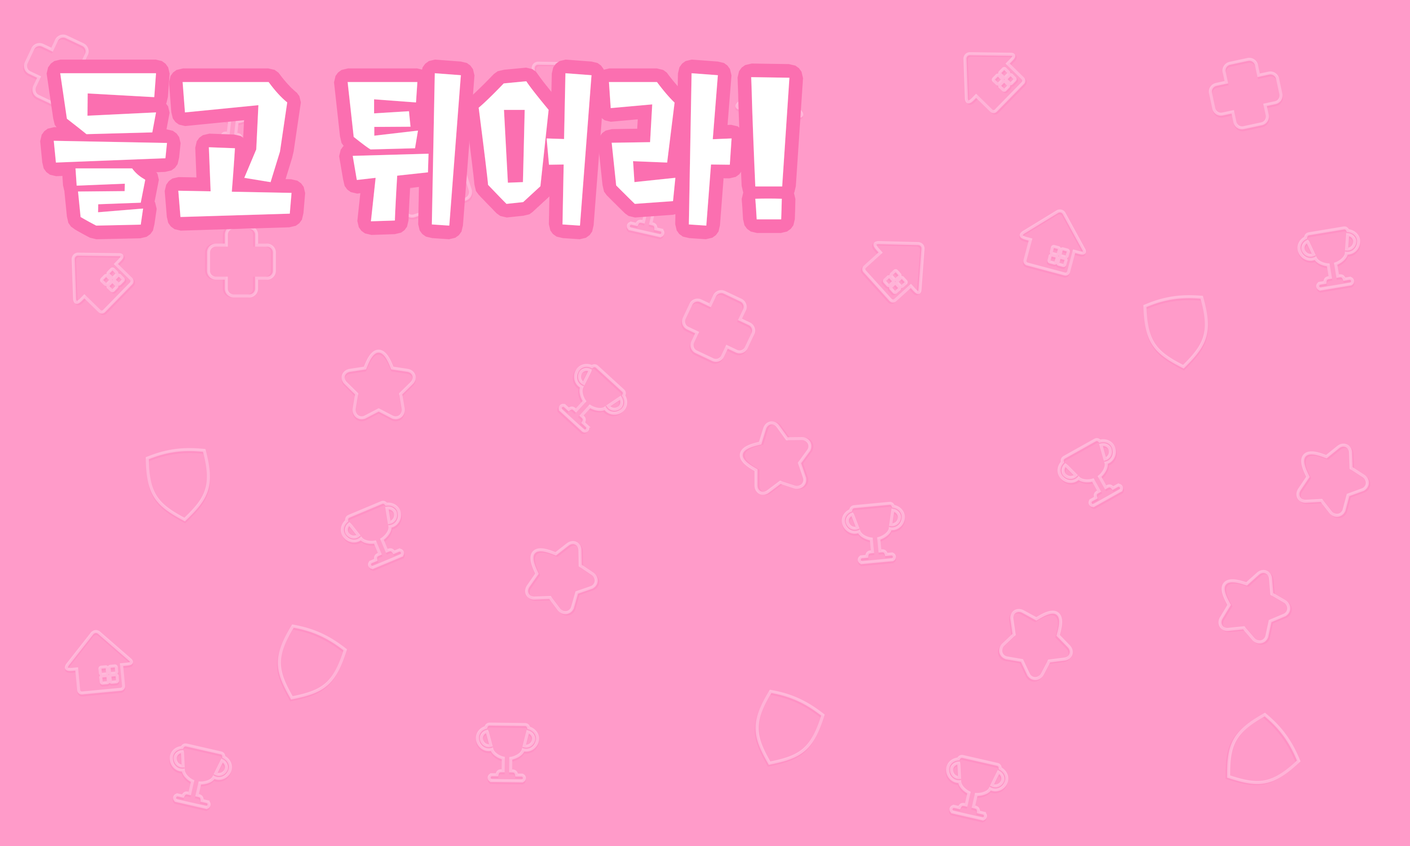
<style>
.page{position:relative;width:1410px;height:846px;background:#ff9bc9}
.page>*{position:absolute;margin:0}
.t1{font:195.8px "Splat2K";letter-spacing:0.01em;color:#ffffff}
</style>
<div class="page">
<p class="t1" style="left:54px;top:73px;width:735px;height:153px">들고 튀어라!</p>
</div>
